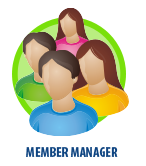
<style>
.page{position:relative;width:146px;height:166px;background:#ffffff}
.page>*{position:absolute;margin:0}
.t1{font:14px "MyriadPro-BoldCond";color:#0e4481}
</style>
<div class="page">
<p class="t1" style="left:26px;top:147px;width:92px;height:10px">MEMBER MANAGER</p>
</div>
